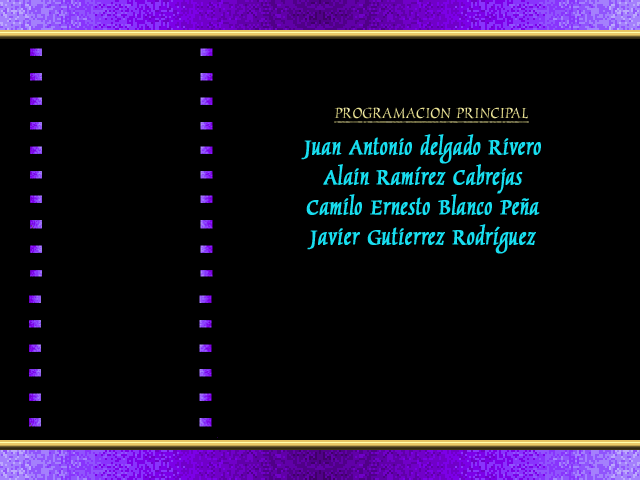
<style>
.page{position:relative;width:640px;height:480px;background:#000000}
.page>*{position:absolute;margin:0}
.t1{font:22.2px "Marigold";color:#e8e08c;text-decoration:underline}
.t2{font:30px/30px "Marigold";color:#18def0;font-weight:bold}
</style>
<div class="page">
<p class="t1" style="left:334px;top:107px;width:195px;height:16px">PROGRAMACION PRINCIPAL</p>
<p class="t2" style="left:301px;top:134px;width:240px;height:120px;text-align:center">Juan Antonio delgado Rivero<br>Alain Ramírez Cabrejas<br>Camilo Ernesto Blanco Peña<br>Javier Gutierrez Rodríguez</p>
</div>
